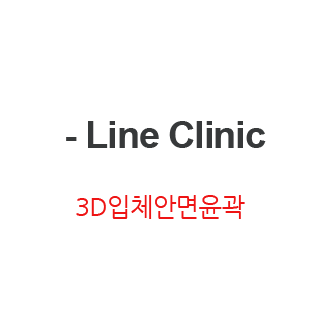
<style>
.page{position:relative;width:320px;height:320px;background:#ffffff}
.page>*{position:absolute;margin:0}
.t1{font:37.5px/33.3px "Arial-BoldMT";letter-spacing:-0.025em;color:#37393a}
.t2{font:37.5px/41.7px "Arial-BoldMT";letter-spacing:-0.025em;color:#37393a}
.t3{font:25px/33.3px "NanumGothic";letter-spacing:-0.025em;color:#ee1414}
</style>
<div class="page">
<p class="t1" style="left:66px;top:121px;width:200px;height:98px;text-align:center"><span class="t2"> </span>- Line Clinic<br><br><span class="t3">3D입체안면윤곽</span></p>
</div>
